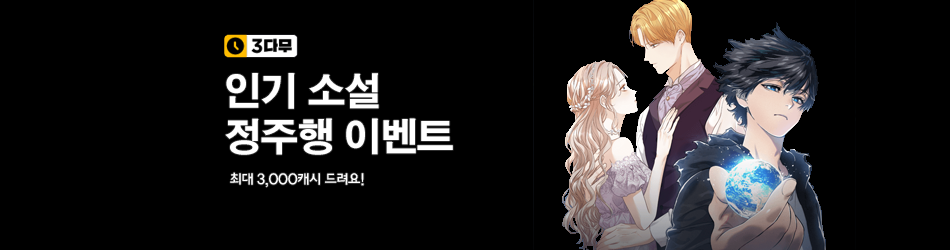
<style>
.page{position:relative;width:950px;height:250px;background:#000000}
.page>*{position:absolute;margin:0}
.t1{font:38px "HYgtrE";letter-spacing:-0.04em;color:#ffffff}
.t2{font:15px "HaanYGodic23";letter-spacing:-0.1em;color:#ffffff}
</style>
<div class="page">
<p class="t1" style="left:225px;top:73px;width:228px;height:82px">인기 소설<br>정주행 이벤트</p>
<p class="t2" style="left:230px;top:172px;width:134px;height:16px">최대 3,000캐시 드려요!</p>
</div>
